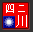
<style>
.page{position:relative;width:33px;height:32px;background:#f20000}
.page>*{position:absolute;margin:0}
.t1{font:10.4px "SimSun";color:#ffffff}
.t2{font:11.7px "SimSun";color:#ffffff}
</style>
<div class="page">
<p class="t1" style="left:6px;top:4px;width:19px;height:9px">四二</p>
<p class="t2" style="left:16px;top:15px;width:11px;height:12px">川</p>
</div>
